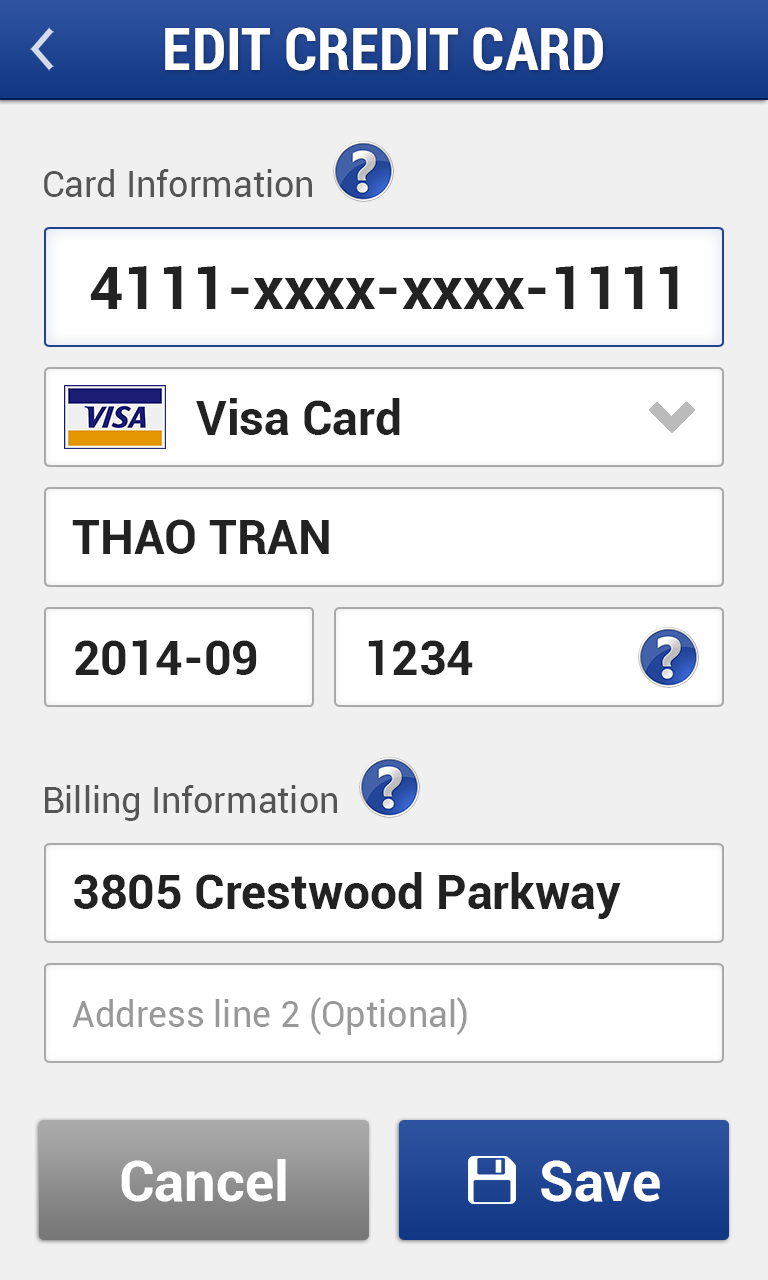
<style>
.page{position:relative;width:768px;height:1280px;background:#f0f0f0}
.page>*{position:absolute;margin:0}
.t1{font:60px "Roboto-BoldCondensed";color:#ffffff}
.t2{font:36px "Roboto-Regular";color:#555555}
.t3{font:60px "Roboto-Bold";color:#222222}
.t4{font:48px "Roboto-Bold";color:#222222}
.t5{font:36px "Roboto-Regular";color:#999999}
.t6{font:56px "Roboto-Bold";color:#ffffff}
</style>
<div class="page">
<p class="t1" style="left:165px;top:27px;width:438px;height:44px">EDIT CREDIT CARD</p>
<p class="t2" style="left:44px;top:169px;width:268px;height:28px">Card Information</p>
<p class="t3" style="left:90px;top:266px;width:588px;height:43px">4111-xxxx-xxxx-1111</p>
<p class="t4" style="left:196px;top:398px;width:204px;height:37px">Visa Card</p>
<p class="t4" style="left:72px;top:519px;width:257px;height:35px">THAO TRAN</p>
<p class="t4" style="left:75px;top:640px;width:182px;height:35px">2014-09</p>
<p class="t4" style="left:368px;top:640px;width:105px;height:35px">1234</p>
<p class="t2" style="left:45px;top:785px;width:292px;height:36px">Billing Information</p>
<p class="t4" style="left:74px;top:872px;width:547px;height:47px">3805 Crestwood Parkway</p>
<p class="t5" style="left:72px;top:997px;width:395px;height:38px">Address line 2 (Optional)</p>
<p class="t6" style="left:121px;top:1159px;width:165px;height:43px">Cancel</p>
<p class="t6" style="left:541px;top:1160px;width:119px;height:42px">Save</p>
</div>
